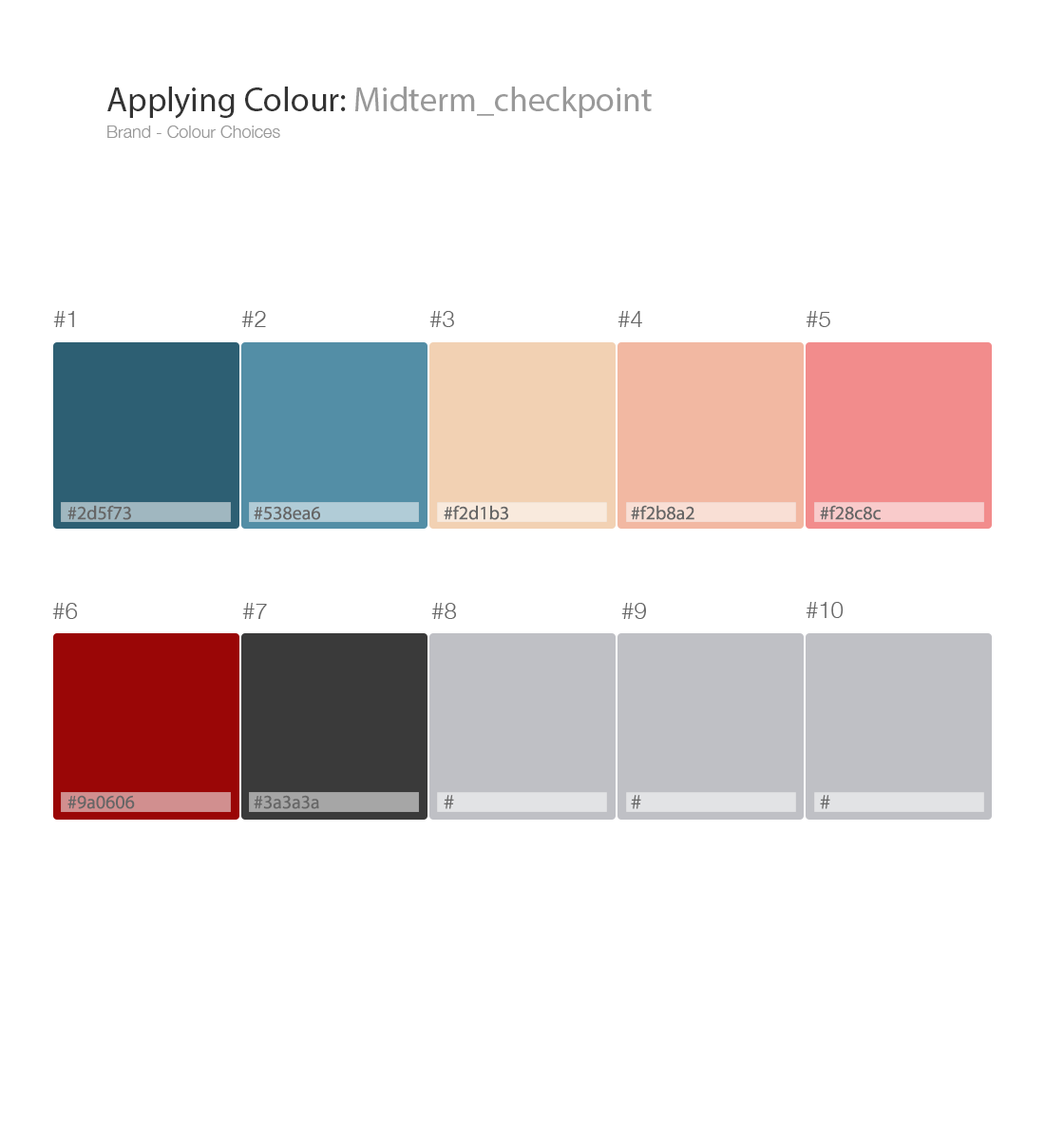
<style>
.page{position:relative;width:1045px;height:1141px;background:#ffffff}
.page>*{position:absolute;margin:0}
.t1{font:34.2px "MyriadPro-Regular";color:#999999}
.t2{font:34.2px "MyriadPro-Regular";color:#333333}
.t3{font:17.1px "HelveticaNeue-Light";color:#999999}
.t4{font:22.8px "HelveticaNeue-Light";color:#666666}
.t5{font:19px "MyriadPro-Regular";color:#666666}
.t6{font:19px "HelveticaNeue-Light";color:#666666}
</style>
<div class="page">
<p class="t1" style="left:107px;top:86px;width:545px;height:33px"><span class="t2">Applying Colour: </span>Midterm_checkpoint</p>
<p class="t3" style="left:107px;top:125px;width:173px;height:13px">Brand - Colour Choices</p>
<p class="t4" style="left:53px;top:311px;width:21px;height:16px">#1</p>
<p class="t4" style="left:241px;top:311px;width:25px;height:16px">#2</p>
<p class="t4" style="left:430px;top:311px;width:24px;height:16px">#3</p>
<p class="t4" style="left:618px;top:311px;width:25px;height:16px">#4</p>
<p class="t4" style="left:806px;top:311px;width:25px;height:16px">#5</p>
<p class="t5" style="left:67px;top:505px;width:64px;height:15px">#2d5f73</p>
<p class="t5" style="left:254px;top:506px;width:66px;height:14px">#538ea6</p>
<p class="t5" style="left:444px;top:505px;width:64px;height:15px">#f2d1b3</p>
<p class="t5" style="left:631px;top:505px;width:64px;height:15px">#f2b8a2</p>
<p class="t5" style="left:820px;top:505px;width:61px;height:15px">#f28c8c</p>
<p class="t4" style="left:52px;top:603px;width:26px;height:16px">#6</p>
<p class="t4" style="left:242px;top:603px;width:25px;height:16px">#7</p>
<p class="t4" style="left:432px;top:603px;width:24px;height:16px">#8</p>
<p class="t4" style="left:622px;top:603px;width:24px;height:16px">#9</p>
<p class="t4" style="left:806px;top:602px;width:38px;height:16px">#10</p>
<p class="t5" style="left:67px;top:795px;width:68px;height:14px">#9a0606</p>
<p class="t5" style="left:254px;top:795px;width:65px;height:14px">#3a3a3a</p>
<p class="t6" style="left:444px;top:795px;width:10px;height:14px">#</p>
<p class="t6" style="left:631px;top:795px;width:11px;height:14px">#</p>
<p class="t6" style="left:820px;top:795px;width:11px;height:14px">#</p>
</div>
